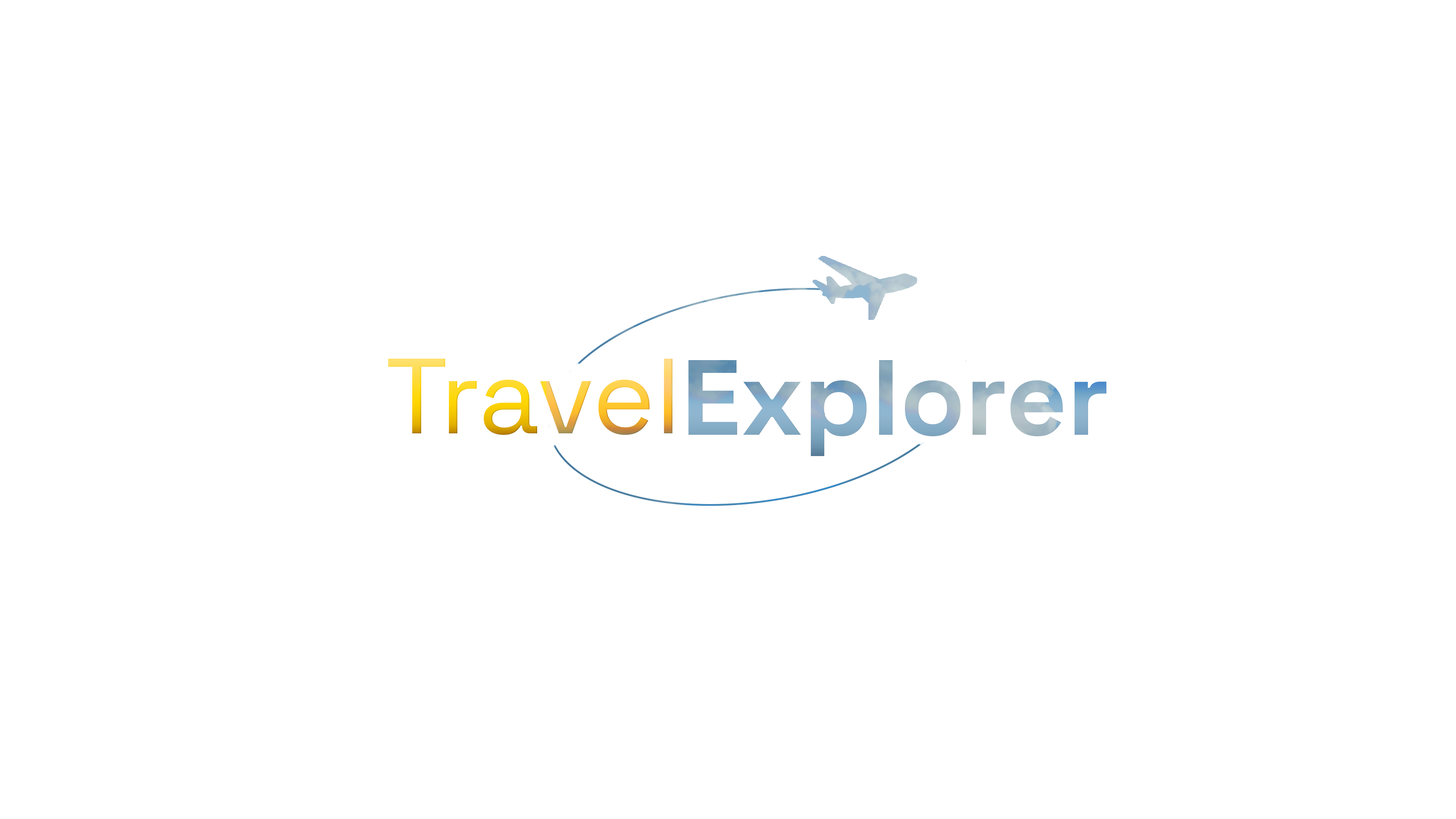
<style>
.page{position:relative;width:1456px;height:819px;background:#ffffff}
.page>*{position:absolute;margin:0}
.t1{font:106.6px "SpaceGrotesk_397.000wght"}
.t2{font:106.6px "SpaceGrotesk-Bold"}
</style>
<div class="page">
<p class="t1" style="left:388px;top:359px;width:285px;height:76px">Travel</p>
<p class="t2" style="left:688px;top:360px;width:419px;height:96px">Explorer</p>
</div>
